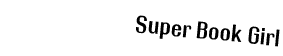
<style>
.page{position:relative;width:283px;height:56px;background:#ffffff}
.page>*{position:absolute;margin:0}
.t1{font:24px "RolloutPlain";color:#000000}
</style>
<div class="page">
<p class="t1" style="left:136px;top:15px;width:144px;height:32px;rotate:6deg">Super Book Girl</p>
</div>
